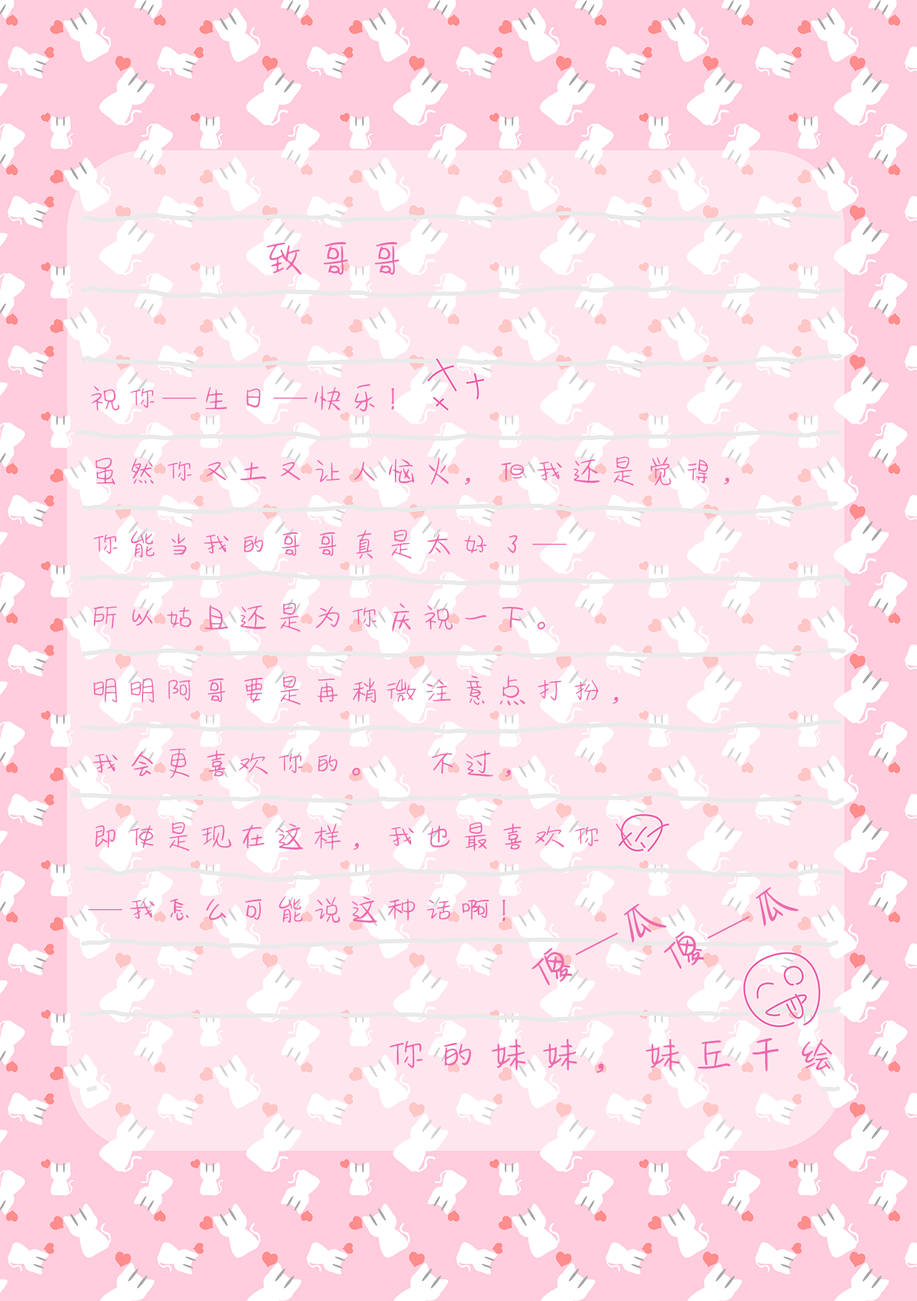
<style>
.page{position:relative;width:917px;height:1301px;background:#ffe6ee}
.page>*{position:absolute;margin:0}
.t1{font:47.1px "FZSEYBJW--GB1-0";letter-spacing:0.09em;color:#ee68ad}
.t2{font:34px/73.1px "FZSEYBJW--GB1-0";letter-spacing:0.09em;color:#ee68ad}
</style>
<div class="page">
<p class="t1" style="left:266px;top:241px;width:133px;height:34px">致哥哥</p>
<p class="t2" style="left:88px;top:384px;width:641px;height:539px">祝你—生日—快乐！<br>虽然你又土又让人恼火，但我还是觉得，<br>你能当我的哥哥真是太好了—<br>所以姑且还是为你庆祝一下。<br>明明阿哥要是再稍微注意点打扮，<br>我会更喜欢你的。     不过，<br>即使是现在这样，我也最喜欢你\<br>—我怎么可能说这种话啊！</p>
<p class="t1" style="left:663px;top:887px;width:136px;height:82px;rotate:-27deg">傻—瓜</p>
<p class="t1" style="left:531px;top:903px;width:136px;height:83px;rotate:-27deg">傻—瓜</p>
<p class="t1" style="left:390px;top:1038px;width:442px;height:35px">你的妹妹，妹丘千绘</p>
</div>
